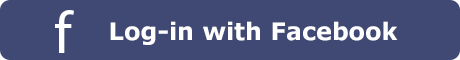
<style>
.page{position:relative;width:460px;height:60px;background:#3f4974}
.page>*{position:absolute;margin:0}
.t1{font:60px "MyriadPro-Regular";color:#ffffff}
.t2{font:24px "Verdana-Bold";color:#ffffff}
</style>
<div class="page">
<p class="t1" style="left:55px;top:10px;width:19px;height:43px">f</p>
<p class="t2" style="left:110px;top:21px;width:288px;height:24px">Log-in with Facebook</p>
</div>
